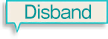
<style>
.page{position:relative;width:108px;height:39px;background:#f4ece0}
.page>*{position:absolute;margin:0}
.t1{font:18px "GothicMB101Pro-Medium";letter-spacing:-0.04em;color:#009799;scale:0.9 1}
</style>
<div class="page">
<p class="t1" style="left:25px;top:4px;width:66px;height:15px">Disband</p>
</div>
